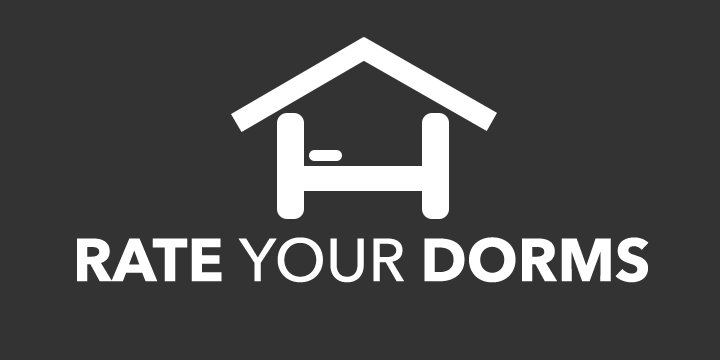
<style>
.page{position:relative;width:720px;height:360px;background:#333333}
.page>*{position:absolute;margin:0}
.t1{font:60px "AvenirNext-Bold";color:#ffffff}
.t2{font:60px "AvenirNext-Medium";color:#ffffff}
</style>
<div class="page">
<p class="t1" style="left:77px;top:237px;width:572px;height:46px">RATE <span class="t2">YOUR </span>DORMS</p>
</div>
